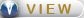
<style>
.page{position:relative;width:84px;height:18px}
.page>*{position:absolute;margin:0}
.t1{font:16px "SimSun";color:#ffffff;font-weight:bold}
.t2{font:14px "ArialRoundedMTBold";letter-spacing:0.2em;color:#ab8725}
</style>
<div class="page">
<p class="t1" style="left:5px;top:3px;width:9px;height:12px">V</p>
<p class="t2" style="left:26px;top:4px;width:45px;height:10px">VIEW</p>
</div>
